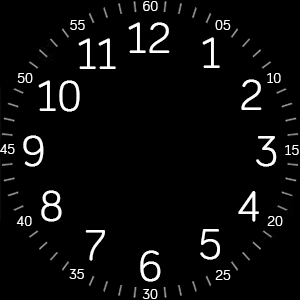
<style>
.page{position:relative;width:300px;height:300px;background:#000000}
.page>*{position:absolute;margin:0}
.t1{font:14px "Seville-Regular";color:#ffffff}
.t2{font:44px "Seville-Regular";color:#ffffff}
</style>
<div class="page">
<p class="t1" style="left:143px;top:1px;width:15px;height:10px">60</p>
<p class="t1" style="left:70px;top:20px;width:15px;height:10px">55</p>
<p class="t2" style="left:128px;top:22px;width:42px;height:31px">12</p>
<p class="t1" style="left:215px;top:20px;width:16px;height:10px">05</p>
<p class="t2" style="left:78px;top:38px;width:38px;height:31px">11</p>
<p class="t2" style="left:202px;top:37px;width:18px;height:31px">1</p>
<p class="t1" style="left:17px;top:73px;width:16px;height:10px">50</p>
<p class="t1" style="left:267px;top:73px;width:14px;height:10px">10</p>
<p class="t2" style="left:38px;top:80px;width:42px;height:32px">10</p>
<p class="t2" style="left:241px;top:79px;width:21px;height:31px">2</p>
<p class="t2" style="left:23px;top:135px;width:21px;height:32px">9</p>
<p class="t2" style="left:256px;top:136px;width:21px;height:31px">3</p>
<p class="t1" style="left:0px;top:144px;width:15px;height:10px">45</p>
<p class="t1" style="left:285px;top:145px;width:14px;height:10px">15</p>
<p class="t2" style="left:41px;top:190px;width:21px;height:32px">8</p>
<p class="t2" style="left:238px;top:191px;width:21px;height:31px">4</p>
<p class="t1" style="left:16px;top:216px;width:16px;height:10px">40</p>
<p class="t1" style="left:267px;top:216px;width:16px;height:10px">20</p>
<p class="t2" style="left:85px;top:230px;width:20px;height:31px">7</p>
<p class="t2" style="left:200px;top:229px;width:20px;height:31px">5</p>
<p class="t2" style="left:140px;top:250px;width:21px;height:32px">6</p>
<p class="t1" style="left:69px;top:269px;width:15px;height:10px">35</p>
<p class="t1" style="left:215px;top:270px;width:16px;height:10px">25</p>
<p class="t1" style="left:142px;top:289px;width:16px;height:10px">30</p>
</div>
